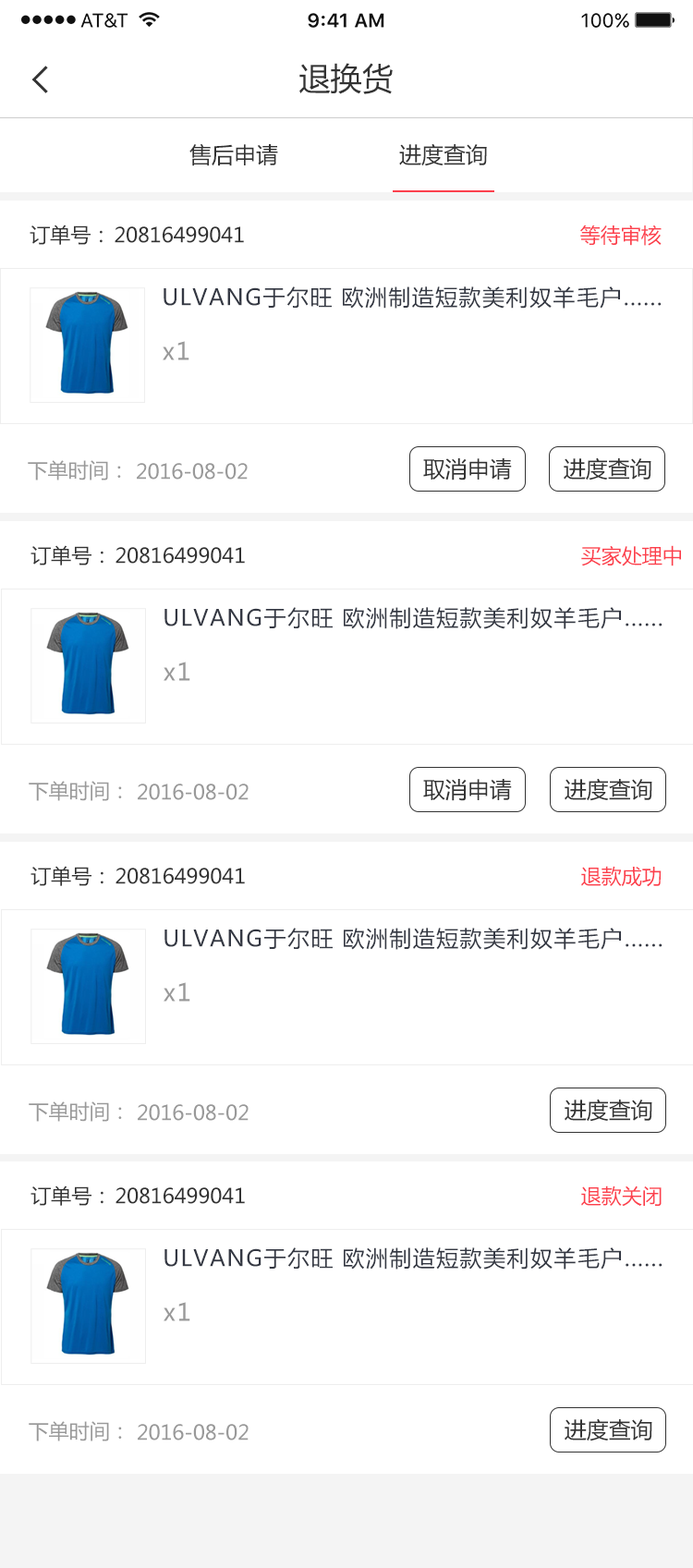
<style>
.page{position:relative;width:693px;height:1568px;background:#ffffff}
.page>*{position:absolute;margin:0}
.t1{font:31.4px "MicrosoftYaHei";color:#333333}
.t2{font:22.2px "MicrosoftYaHei";color:#333333}
.t3{font:20.3px "MicrosoftYaHei";color:#333333}
.t4{font:20.3px "MicrosoftYaHei";color:#fc3f4c}
.t5{font:22.2px "MicrosoftYaHei";letter-spacing:0.06em;color:#343843}
.t6{font:24px "MicrosoftYaHei";letter-spacing:0.06em;color:#999999}
.t7{font:20.3px "MicrosoftYaHei";color:#999999}
</style>
<div class="page">
<p class="t1" style="left:299px;top:63px;width:94px;height:31px">退换货</p>
<p class="t2" style="left:189px;top:143px;width:89px;height:23px">售后申请</p>
<p class="t2" style="left:399px;top:143px;width:88px;height:23px">进度查询</p>
<p class="t3" style="left:30px;top:225px;width:73px;height:20px">订单号：</p>
<p class="t3" style="left:115px;top:226px;width:129px;height:17px">20816499041</p>
<p class="t4" style="left:580px;top:225px;width:82px;height:21px">等待审核</p>
<p class="t5" style="left:164px;top:286px;width:498px;height:23px">ULVANG于尔旺 欧洲制造短款美利奴羊毛户......</p>
<p class="t6" style="left:163px;top:341px;width:26px;height:19px">x1</p>
<p class="t7" style="left:28px;top:460px;width:93px;height:20px">下单时间：</p>
<p class="t2" style="left:423px;top:458px;width:89px;height:22px">取消申请</p>
<p class="t2" style="left:564px;top:457px;width:87px;height:23px">进度查询</p>
<p class="t7" style="left:137px;top:463px;width:111px;height:17px">2016-08-02</p>
<p class="t3" style="left:30px;top:545px;width:73px;height:20px">订单号：</p>
<p class="t4" style="left:581px;top:545px;width:100px;height:21px">买家处理中</p>
<p class="t3" style="left:115px;top:547px;width:130px;height:17px">20816499041</p>
<p class="t5" style="left:164px;top:607px;width:498px;height:22px">ULVANG于尔旺 欧洲制造短款美利奴羊毛户......</p>
<p class="t6" style="left:164px;top:662px;width:26px;height:19px">x1</p>
<p class="t7" style="left:29px;top:781px;width:93px;height:20px">下单时间：</p>
<p class="t7" style="left:138px;top:784px;width:111px;height:16px">2016-08-02</p>
<p class="t2" style="left:423px;top:779px;width:89px;height:22px">取消申请</p>
<p class="t2" style="left:565px;top:778px;width:87px;height:23px">进度查询</p>
<p class="t3" style="left:30px;top:866px;width:73px;height:20px">订单号：</p>
<p class="t3" style="left:115px;top:868px;width:130px;height:16px">20816499041</p>
<p class="t4" style="left:581px;top:866px;width:81px;height:21px">退款成功</p>
<p class="t5" style="left:164px;top:928px;width:498px;height:22px">ULVANG于尔旺 欧洲制造短款美利奴羊毛户......</p>
<p class="t6" style="left:164px;top:982px;width:26px;height:20px">x1</p>
<p class="t7" style="left:29px;top:1101px;width:93px;height:21px">下单时间：</p>
<p class="t7" style="left:138px;top:1104px;width:111px;height:17px">2016-08-02</p>
<p class="t2" style="left:565px;top:1099px;width:87px;height:23px">进度查询</p>
<p class="t3" style="left:30px;top:1185px;width:73px;height:21px">订单号：</p>
<p class="t3" style="left:115px;top:1187px;width:130px;height:17px">20816499041</p>
<p class="t4" style="left:581px;top:1185px;width:81px;height:22px">退款关闭</p>
<p class="t5" style="left:164px;top:1247px;width:498px;height:23px">ULVANG于尔旺 欧洲制造短款美利奴羊毛户......</p>
<p class="t6" style="left:164px;top:1302px;width:26px;height:19px">x1</p>
<p class="t7" style="left:29px;top:1421px;width:93px;height:20px">下单时间：</p>
<p class="t2" style="left:565px;top:1418px;width:87px;height:23px">进度查询</p>
<p class="t7" style="left:138px;top:1424px;width:111px;height:16px">2016-08-02</p>
</div>
